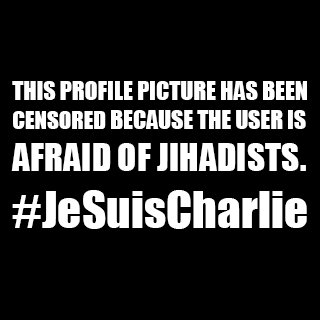
<style>
.page{position:relative;width:320px;height:320px;background:#000000}
.page>*{position:absolute;margin:0}
.t1{font:23.8px "Impact";color:#ffffff}
.t2{font:23px "Impact";color:#ffffff}
.t3{font:23.6px "Impact";color:#ffffff}
.t4{font:35.4px "Impact";color:#ffffff}
.t5{font:47.2px "Impact";color:#ffffff}
</style>
<div class="page">
<p class="t1" style="left:11px;top:81px;width:296px;height:148px">THIS PROFILE PICTURE HAS BEEN <br><span class="t2">CENSORED </span><span class="t3">BECAUSE THE USER IS <br></span><span class="t4">AFRAID OF JIHADISTS. <br></span><span class="t5">#JeSuisCharlie</span></p>
</div>
